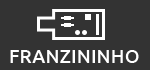
<style>
.page{position:relative;width:150px;height:70px;background:#333333}
.page>*{position:absolute;margin:0}
.t1{font:19.3px "Ubuntu-Medium";color:#ffffff}
</style>
<div class="page">
<p class="t1" style="left:10px;top:50px;width:129px;height:13px">FRANZININHO</p>
</div>
